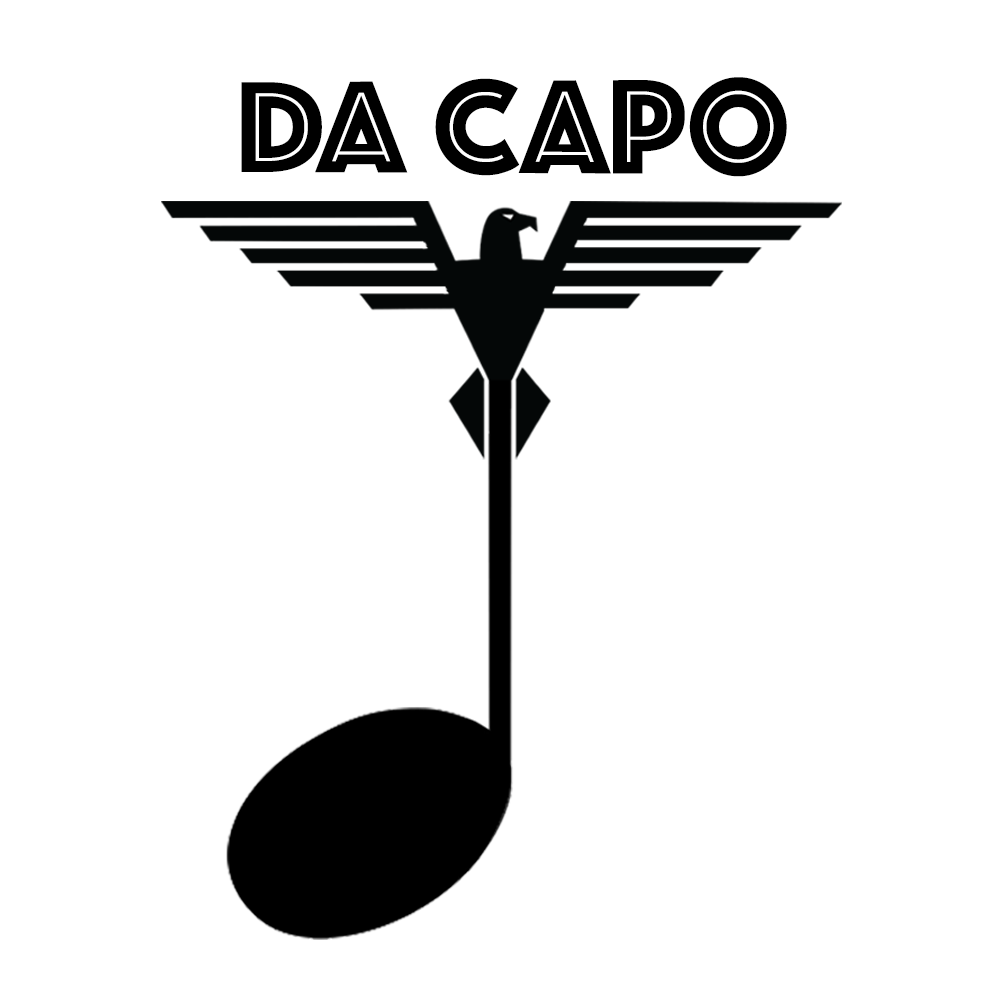
<style>
.page{position:relative;width:1000px;height:1000px;background:#ffffff}
.page>*{position:absolute;margin:0}
.t1{font:137.5px "Phosphate-Inline";letter-spacing:0.005em;color:#000000}
</style>
<div class="page">
<p class="t1" style="left:241px;top:77px;width:546px;height:100px">DA CAPO</p>
</div>
